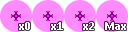
<style>
.page{position:relative;width:128px;height:32px;background:#ff8cff}
.page>*{position:absolute;margin:0}
.t1{font:12px "Calibri-Bold";color:#ffffff}
</style>
<div class="page">
<p class="t1" style="left:19px;top:22px;width:11px;height:8px">x0</p>
<p class="t1" style="left:51px;top:22px;width:12px;height:8px">x1</p>
<p class="t1" style="left:83px;top:22px;width:11px;height:8px">x2</p>
<p class="t1" style="left:105px;top:22px;width:21px;height:8px">Max</p>
</div>
